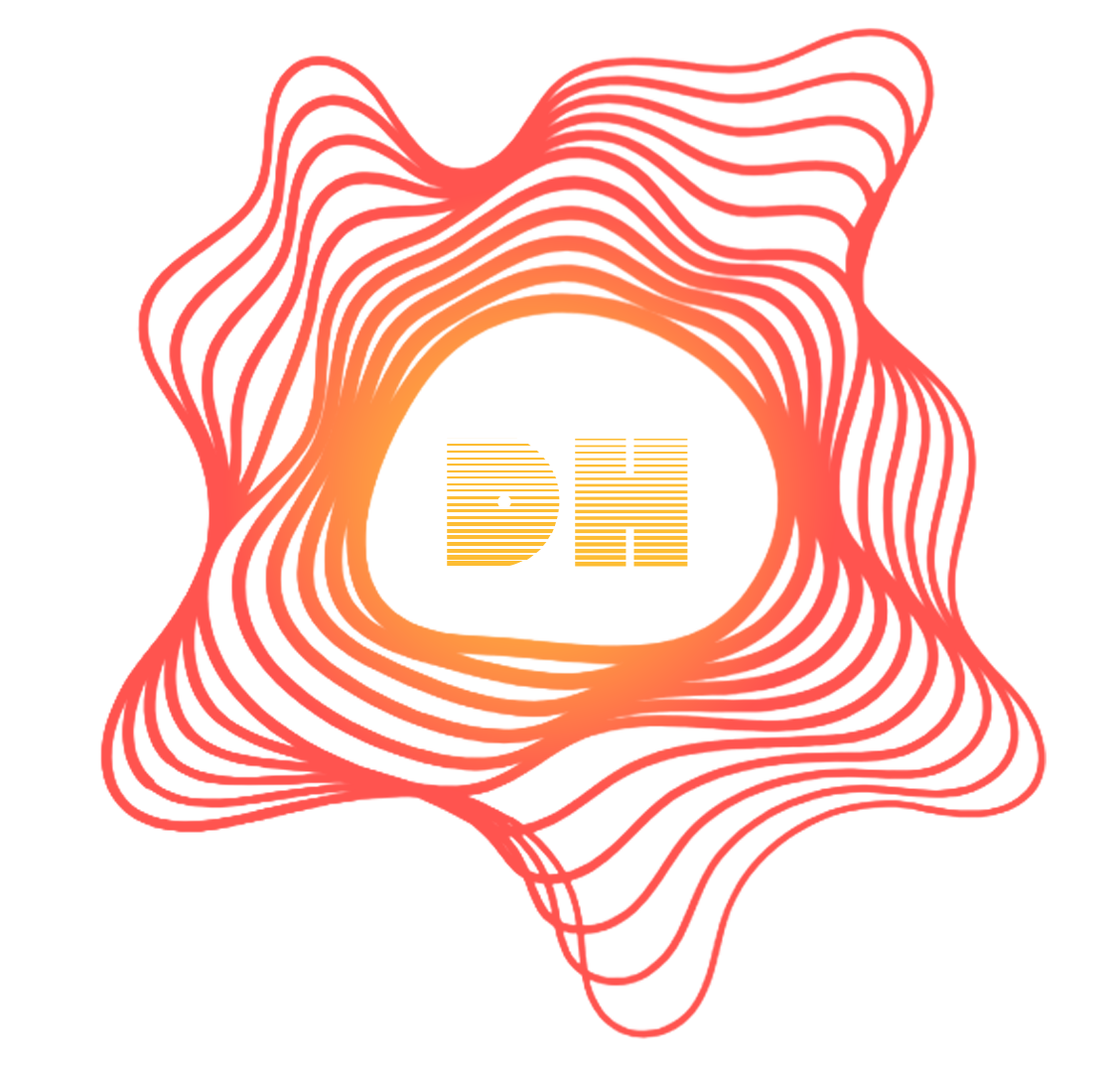
<style>
.page{position:relative;width:1116px;height:1068px;background:#ffffff}
.page>*{position:absolute;margin:0}
.t1{font:187.4px "Mekon-Gradient";color:#febd33}
</style>
<div class="page">
<p class="t1" style="left:447px;top:438px;width:241px;height:129px">DH</p>
</div>
